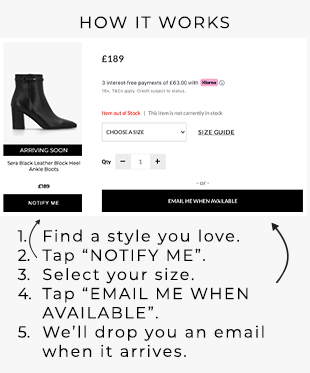
<style>
.page{position:relative;width:310px;height:373px;background:#f7f7f7}
.page>*{position:absolute;margin:0}
.t1{font:16.4px "Montserrat-Regular";letter-spacing:0.1em;color:#000000;text-transform:uppercase}
.t2{font:16px "Montserrat-Regular";letter-spacing:0.1em;color:#000000}
</style>
<div class="page">
<p class="t1" style="left:80px;top:16px;width:149px;height:13px">how it works</p>
<p class="t2" style="left:17px;top:229px;width:247px;height:128px">Find a style you love.<br>Tap “NOTIFY ME”.<br>Select your size.<br>Tap “EMAIL ME WHEN AVAILABLE”.<br>We’ll drop you an email when it arrives.</p>
</div>
